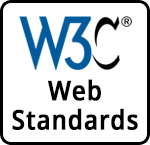
<style>
.page{position:relative;width:150px;height:145px;background:#ffffff}
.page>*{position:absolute;margin:0}
.t1{font:27.1px/29.2px "OpenSans-SemiBold";letter-spacing:0.02em;color:#000000;font-weight:bold;scale:0.88 1}
</style>
<div class="page">
<p class="t1" style="left:12px;top:79px;width:126px;height:51px;text-align:center">Web<br>Standards</p>
</div>
